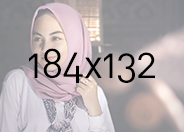
<style>
.page{position:relative;width:184px;height:132px}
.page>*{position:absolute;margin:0}
.t1{font:41px "DIN-RegularAlternate";letter-spacing:-0.025em;color:#000000}
</style>
<div class="page">
<p class="t1" style="left:29px;top:48px;width:126px;height:35px">184x132</p>
</div>
